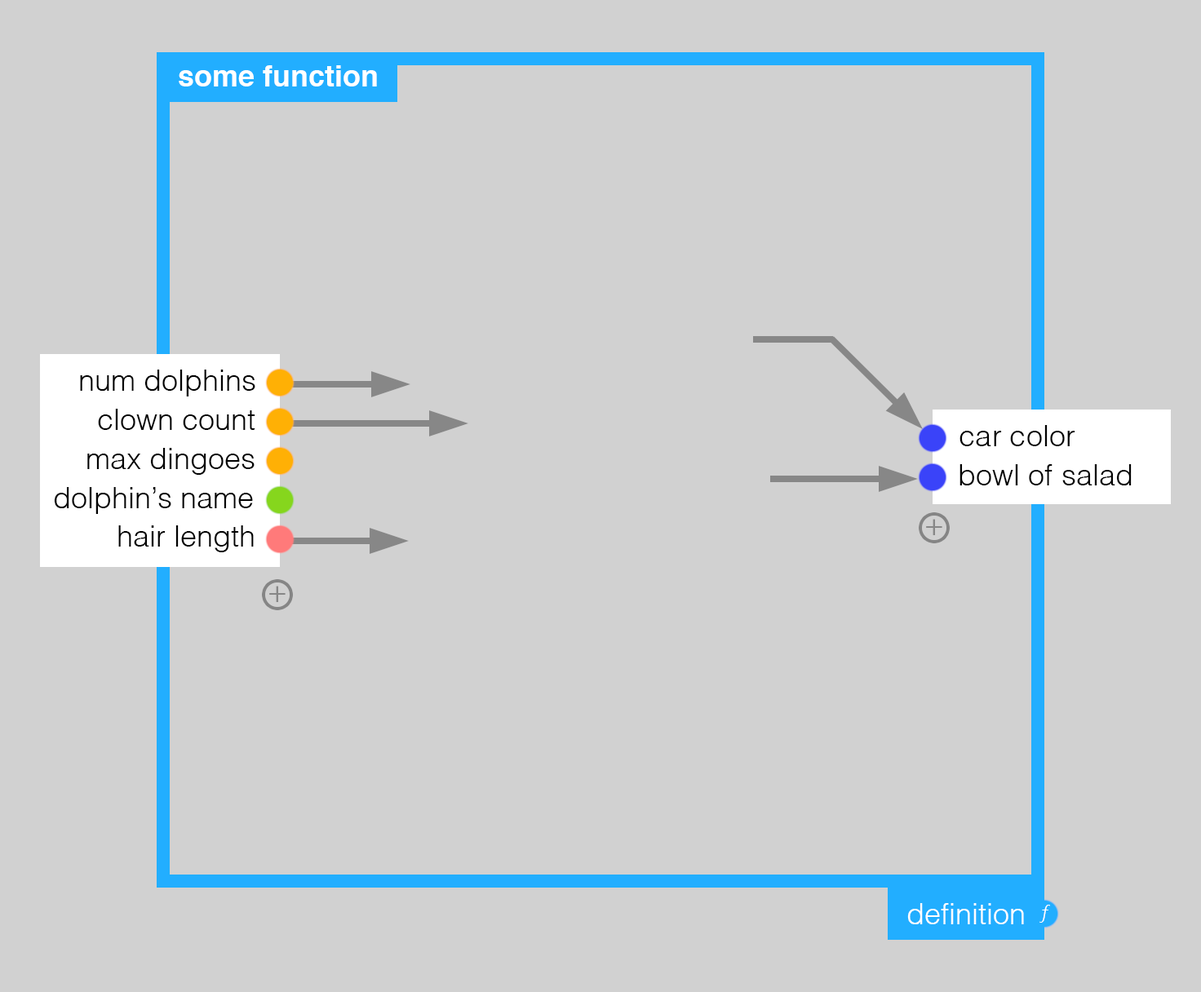
<style>
.page{position:relative;width:1201px;height:992px;background:#d1d1d1}
.page>*{position:absolute;margin:0}
.t1{font:29.4px "Helvetica-Bold";color:#ffffff}
.t2{font:29.4px "Helvetica-Light";color:#000000}
.t3{font:32.1px "Helvetica-Light";color:#878787}
.t4{font:29.4px "Helvetica-Light";color:#ffffff}
.t5{font:19.6px "Helvetica-Light";color:#ffffff}
</style>
<div class="page">
<p class="t1" style="left:179px;top:65px;width:198px;height:22px">some function</p>
<p class="t2" style="left:80px;top:370px;width:175px;height:27px">num dolphins</p>
<p class="t2" style="left:98px;top:409px;width:157px;height:21px">clown count</p>
<p class="t2" style="left:960px;top:425px;width:116px;height:21px">car color</p>
<p class="t2" style="left:87px;top:448px;width:168px;height:27px">max dingoes</p>
<p class="t2" style="left:960px;top:464px;width:172px;height:22px">bowl of salad</p>
<p class="t2" style="left:54px;top:487px;width:199px;height:27px">dolphin’s name</p>
<p class="t3" style="left:926px;top:519px;width:17px;height:16px">+</p>
<p class="t2" style="left:118px;top:526px;width:136px;height:27px">hair length</p>
<p class="t3" style="left:269px;top:586px;width:17px;height:16px">+</p>
<p class="t4" style="left:908px;top:904px;width:116px;height:21px">definition</p>
<p class="t5" style="left:1040px;top:905px;width:10px;height:18px">ƒ</p>
</div>
